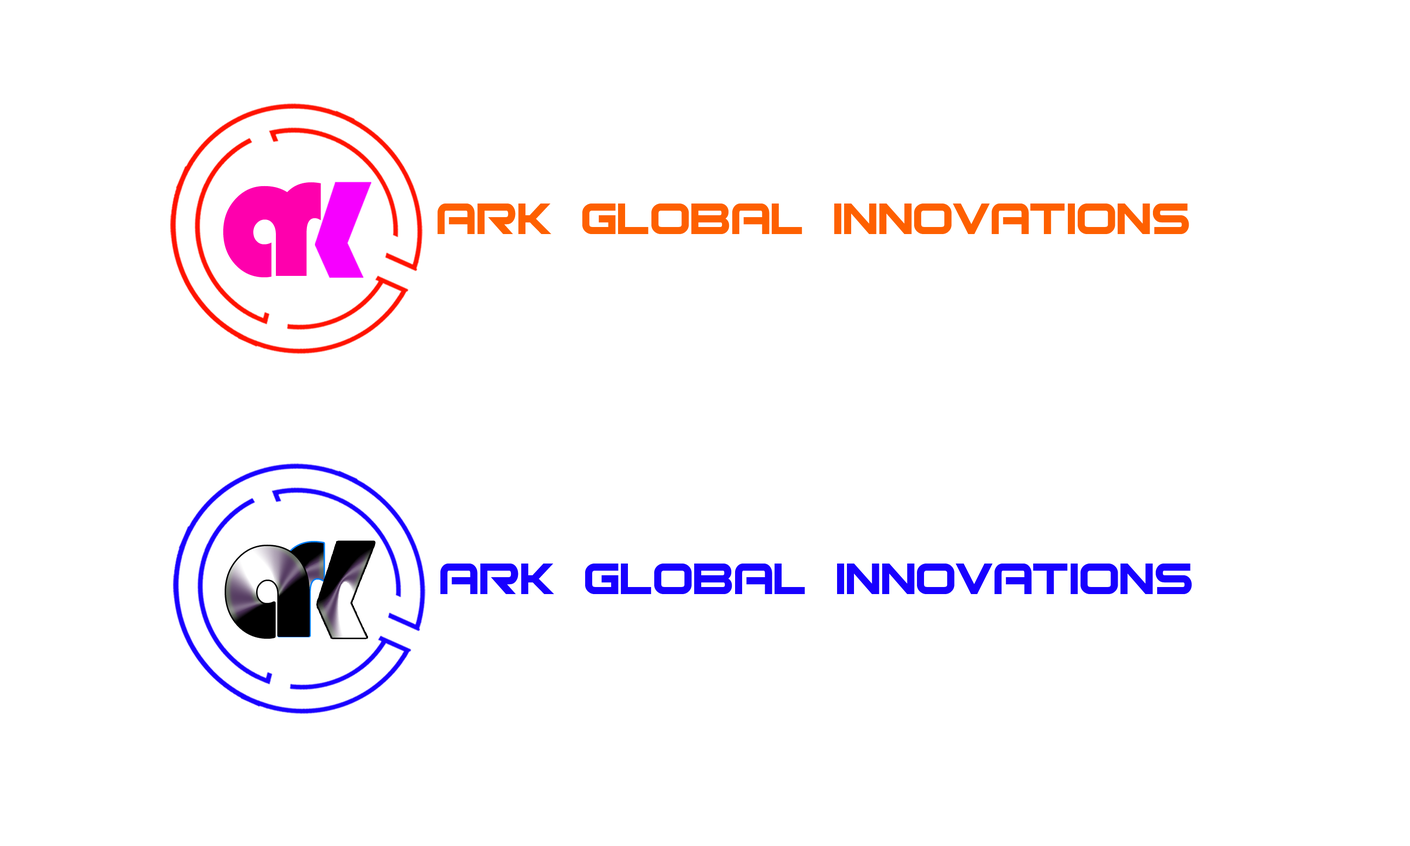
<style>
.page{position:relative;width:1410px;height:846px;background:#ffffff}
.page>*{position:absolute;margin:0}
.t1{font:180.1px "Bauhaus93";color:#fe00ad;scale:0.9 1}
.t2{font:187.8px "Bauhaus93";color:#fe00ad;scale:0.89 1}
.t3{font:59.7px "Bitsumishi";color:#fe6000}
.t4{font:187.8px "Bauhaus93";scale:0.89 1}
.t5{font:59.7px "Bitsumishi";color:#1800ff}
</style>
<div class="page">
<p class="t1" style="left:223px;top:186px;width:82px;height:91px">a</p>
<p class="t2" style="left:276px;top:182px;width:45px;height:94px">r</p>
<p class="t3" style="left:437px;top:203px;width:752px;height:31px">ARK Global innovations</p>
<p class="t4" style="left:279px;top:542px;width:45px;height:94px">r</p>
<p class="t5" style="left:440px;top:563px;width:752px;height:31px">ARK Global innovations</p>
</div>
